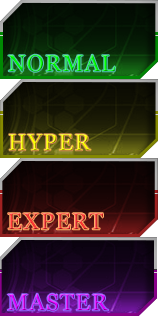
<style>
.page{position:relative;width:158px;height:316px}
.page>*{position:absolute;margin:0}
.t1{font:23px "Vani";letter-spacing:0.05em}
</style>
<div class="page">
<p class="t1" style="left:8px;top:54px;width:107px;height:18px">NORMAL</p>
<p class="t1" style="left:9px;top:134px;width:82px;height:17px">HYPER</p>
<p class="t1" style="left:8px;top:213px;width:95px;height:17px">EXPERT</p>
<p class="t1" style="left:7px;top:293px;width:102px;height:18px">MASTER</p>
</div>
